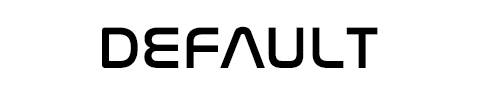
<style>
.page{position:relative;width:480px;height:96px;background:#ffffff}
.page>*{position:absolute;margin:0}
.t1{font:60px "NasalizationRg-Regular";color:#000000}
</style>
<div class="page">
<p class="t1" style="left:102px;top:26px;width:276px;height:42px">DEFAULT</p>
</div>
